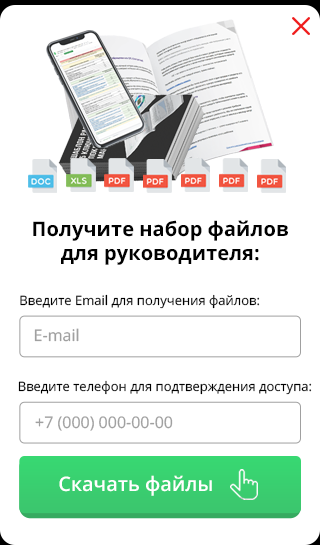
<style>
.page{position:relative;width:320px;height:545px;background:#ffffff}
.page>*{position:absolute;margin:0}
.t1{font:20.1px "OpenSans-Bold";color:#000000}
.t2{font:13px "OpenSans";color:#000000}
.t3{font:16px "OpenSans";color:#a0a0a0}
.t4{font:19.9px "OpenSans-Semibold";color:#ffffff}
</style>
<div class="page">
<p class="t1" style="left:33px;top:220px;width:255px;height:45px;text-align:center">Получите набор файлов<br>для руководителя:</p>
<p class="t2" style="left:20px;top:294px;width:240px;height:15px">Введите Email для получения файлов:</p>
<p class="t3" style="left:34px;top:328px;width:45px;height:14px">E-mail</p>
<p class="t2" style="left:18px;top:380px;width:294px;height:15px">Введите телефон для подтверждения доступа:</p>
<p class="t3" style="left:35px;top:416px;width:138px;height:15px">+7 (000) 000-00-00</p>
<p class="t4" style="left:59px;top:475px;width:153px;height:21px">Скачать файлы</p>
</div>
